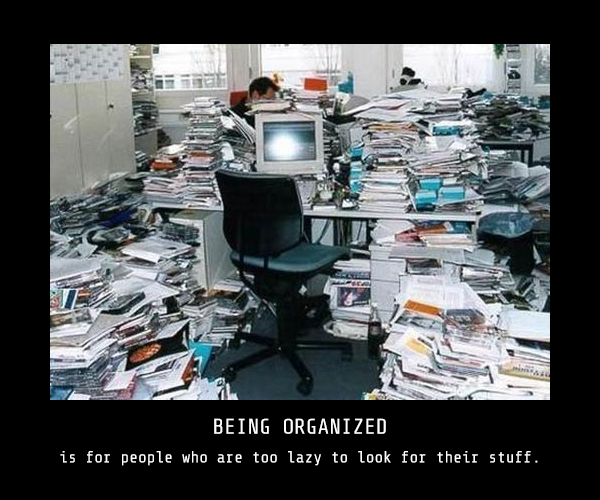
<style>
.page{position:relative;width:600px;height:500px;background:#000000}
.page>*{position:absolute;margin:0}
.t1{font:16.2px/28.8px "ShareTechMono-Regular";color:#ffffff}
.t2{font:21.6px/28.8px "ShareTechMono-Regular";color:#ffffff}
</style>
<div class="page">
<p class="t1" style="left:60px;top:418px;width:478px;height:48px;text-align:center"><span class="t2">BEING ORGANIZED<br></span>is for people who are too lazy to look for their stuff.</p>
</div>
